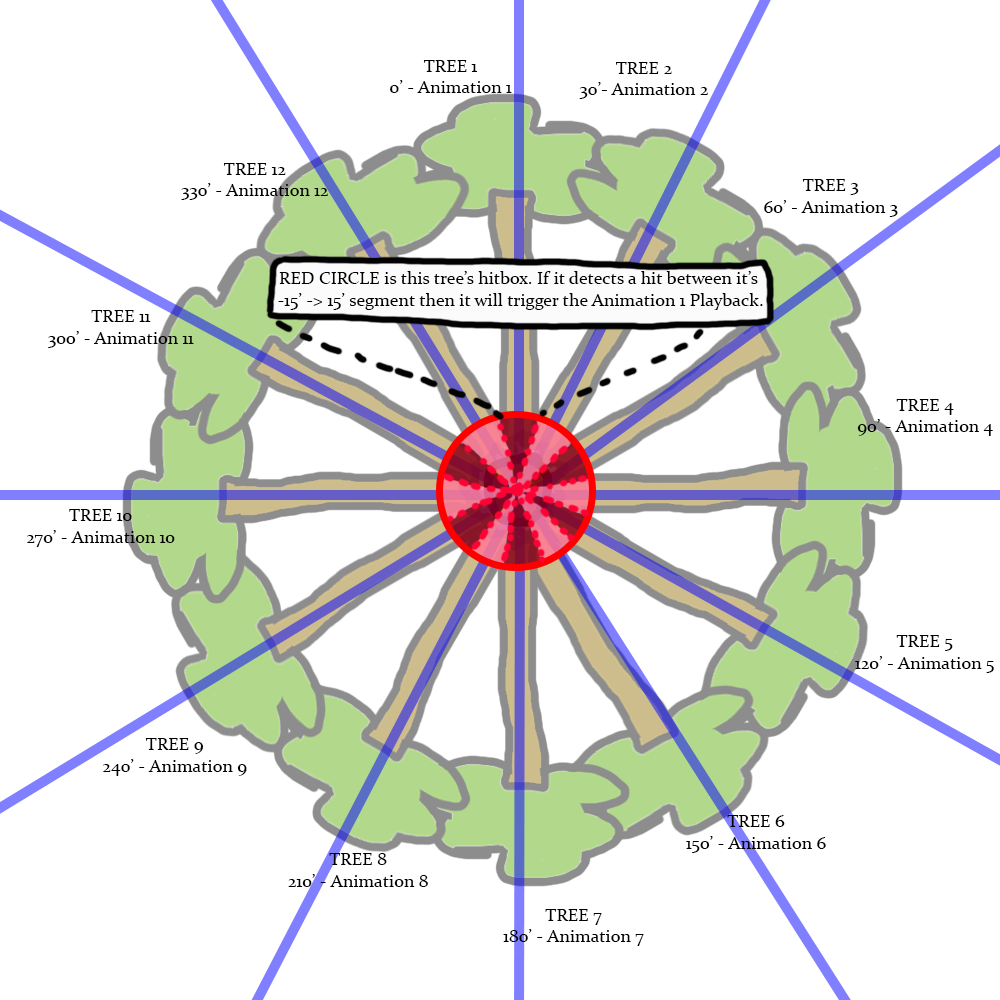
<style>
.page{position:relative;width:1000px;height:1000px;background:#ffffff}
.page>*{position:absolute;margin:0}
.t1{font:18px "Constantia";color:#000000}
</style>
<div class="page">
<p class="t1" style="left:390px;top:60px;width:122px;height:33px;text-align:center">TREE 1<br>0’ - Animation 1</p>
<p class="t1" style="left:579px;top:62px;width:129px;height:37px;text-align:center">TREE 2<br>30’- Animation 2</p>
<p class="t1" style="left:181px;top:163px;width:147px;height:37px;text-align:center">TREE 12<br>330’ - Animation 12</p>
<p class="t1" style="left:764px;top:179px;width:134px;height:38px;text-align:center">TREE 3<br>60’ - Animation 3</p>
<p class="t1" style="left:278px;top:271px;width:485px;height:39px;text-align:center">RED CIRCLE is this tree’s hitbox. If it detects a hit between it’s <br>-15’ -&gt; 15’ segment then it will trigger the Animation 1 Playback.</p>
<p class="t1" style="left:48px;top:310px;width:146px;height:38px;text-align:center">TREE 11<br>300’ - Animation 11</p>
<p class="t1" style="left:857px;top:399px;width:136px;height:37px;text-align:center">TREE 4<br>90’ - Animation 4</p>
<p class="t1" style="left:26px;top:509px;width:149px;height:38px;text-align:center">TREE 10<br>270’ - Animation 10</p>
<p class="t1" style="left:855px;top:635px;width:139px;height:38px;text-align:center">TREE 5<br>120’ - Animation 5</p>
<p class="t1" style="left:102px;top:738px;width:145px;height:38px;text-align:center">TREE 9<br>240’ - Animation 9</p>
<p class="t1" style="left:686px;top:815px;width:140px;height:38px;text-align:center">TREE 6<br>150’ - Animation 6</p>
<p class="t1" style="left:288px;top:853px;width:140px;height:34px;text-align:center">TREE 8<br>210’ - Animation 8</p>
<p class="t1" style="left:503px;top:909px;width:141px;height:37px;text-align:center">TREE 7<br>180’ - Animation 7</p>
</div>
